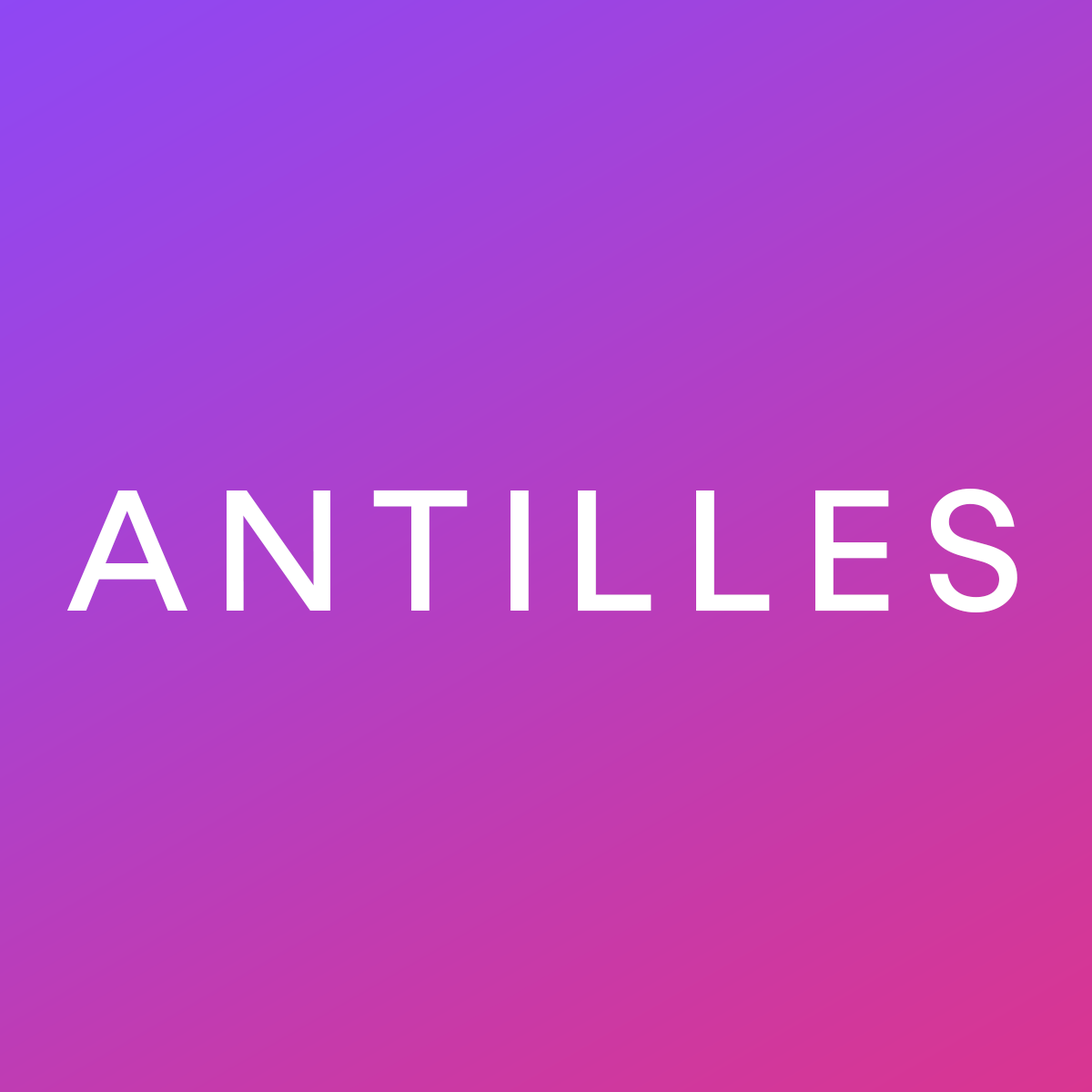
<style>
.page{position:relative;width:1092px;height:1092px}
.page>*{position:absolute;margin:0}
.t1{font:172px "UberMove-Medium";letter-spacing:0.18em;color:#ffffff}
</style>
<div class="page">
<p class="t1" style="left:67px;top:489px;width:950px;height:123px">ANTILLES</p>
</div>
